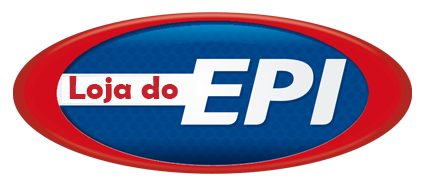
<style>
.page{position:relative;width:425px;height:185px;background:#ffffff}
.page>*{position:absolute;margin:0}
.t1{font:33.3px "BerlinSansFBDemi-Bold";color:#c7202a}
</style>
<div class="page">
<p class="t1" style="left:69px;top:76px;width:109px;height:27px">Loja do</p>
</div>
